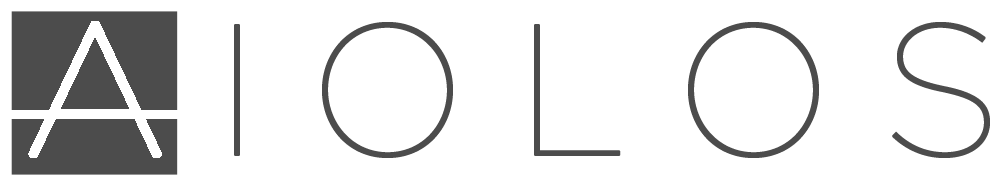
<style>
.page{position:relative;width:1000px;height:183px;background:#ffffff}
.page>*{position:absolute;margin:0}
.t1{font:185.6px "GothamThin";letter-spacing:0.24em;color:#4c4c4c;font-weight:bold}
</style>
<div class="page">
<p class="t1" style="left:234px;top:22px;width:756px;height:136px">IOLOS</p>
</div>
